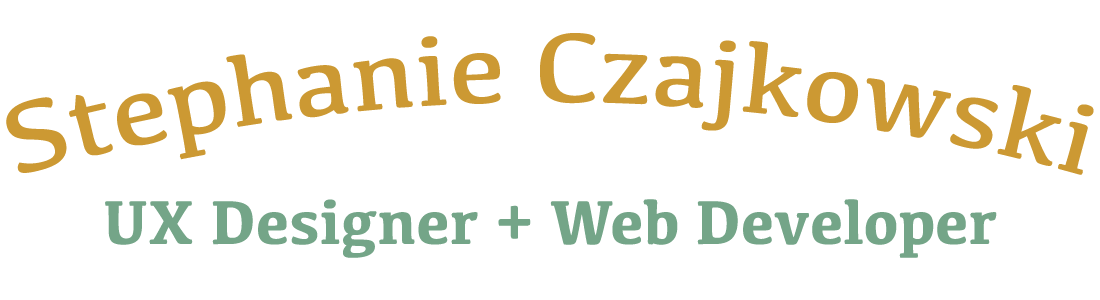
<style>
.page{position:relative;width:1100px;height:300px;background:#ffffff}
.page>*{position:absolute;margin:0}
.t1{font:101.5px "Kefa-Regular";color:#cc9933}
.t2{font:64px "Kefa-Bold";color:#74a588}
</style>
<div class="page">
<p class="t1" style="left:6px;top:33px;width:1088px;height:142px">Stephanie Czajkowski</p>
<p class="t2" style="left:105px;top:199px;width:892px;height:59px">UX Designer + Web Developer</p>
</div>
